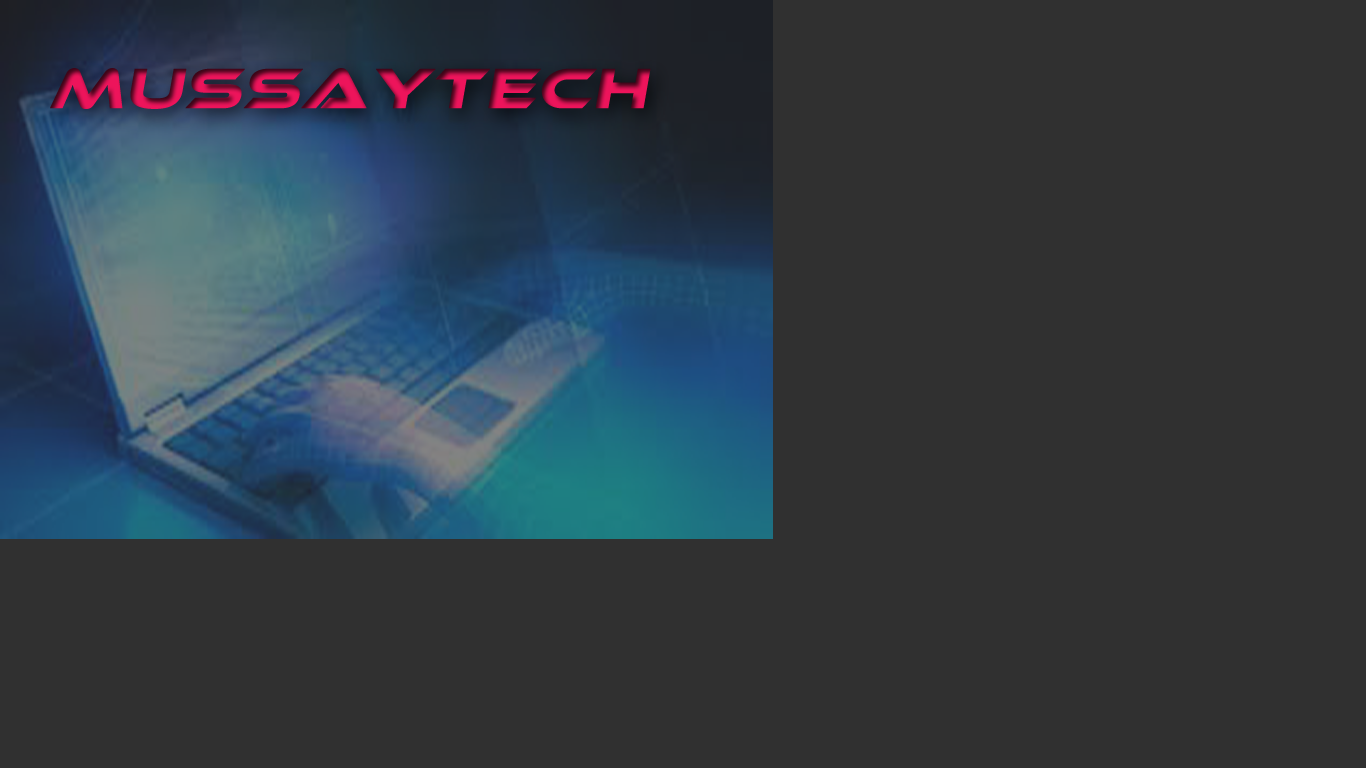
<style>
.page{position:relative;width:1366px;height:768px;background:#303030}
.page>*{position:absolute;margin:0}
.t1{font:58.3px "EthnocentricRg-Regular";letter-spacing:0.005em;font-weight:bold;font-style:italic}
</style>
<div class="page">
<p class="t1" style="left:50px;top:68px;width:601px;height:41px">MUSSAYTECH</p>
</div>
